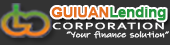
<style>
.page{position:relative;width:170px;height:45px;background:#333333}
.page>*{position:absolute;margin:0}
.t1{font:13.8px "Arial-BoldMT";letter-spacing:-0.025em;color:#23973e;font-weight:bold;scale:1.06 1}
.t2{font:13.8px "Arial-BoldMT";letter-spacing:-0.025em;color:#e4701f;font-weight:bold;scale:1.06 1}
.t3{font:9.4px "Corbel";letter-spacing:0.075em;color:#ffffff;font-weight:bold;scale:1.57 1}
.t4{font:8.1px "InkFree";letter-spacing:-0.025em;color:#ffffff;font-weight:bold;scale:1.37 1}
</style>
<div class="page">
<p class="t1" style="left:51px;top:7px;width:115px;height:14px"><span class="t2">GUIUAN</span>Lending</p>
<p class="t3" style="left:52px;top:22px;width:112px;height:8px">CORPORATION</p>
<p class="t4" style="left:66px;top:31px;width:103px;height:8px">“Your finance solution”</p>
</div>
